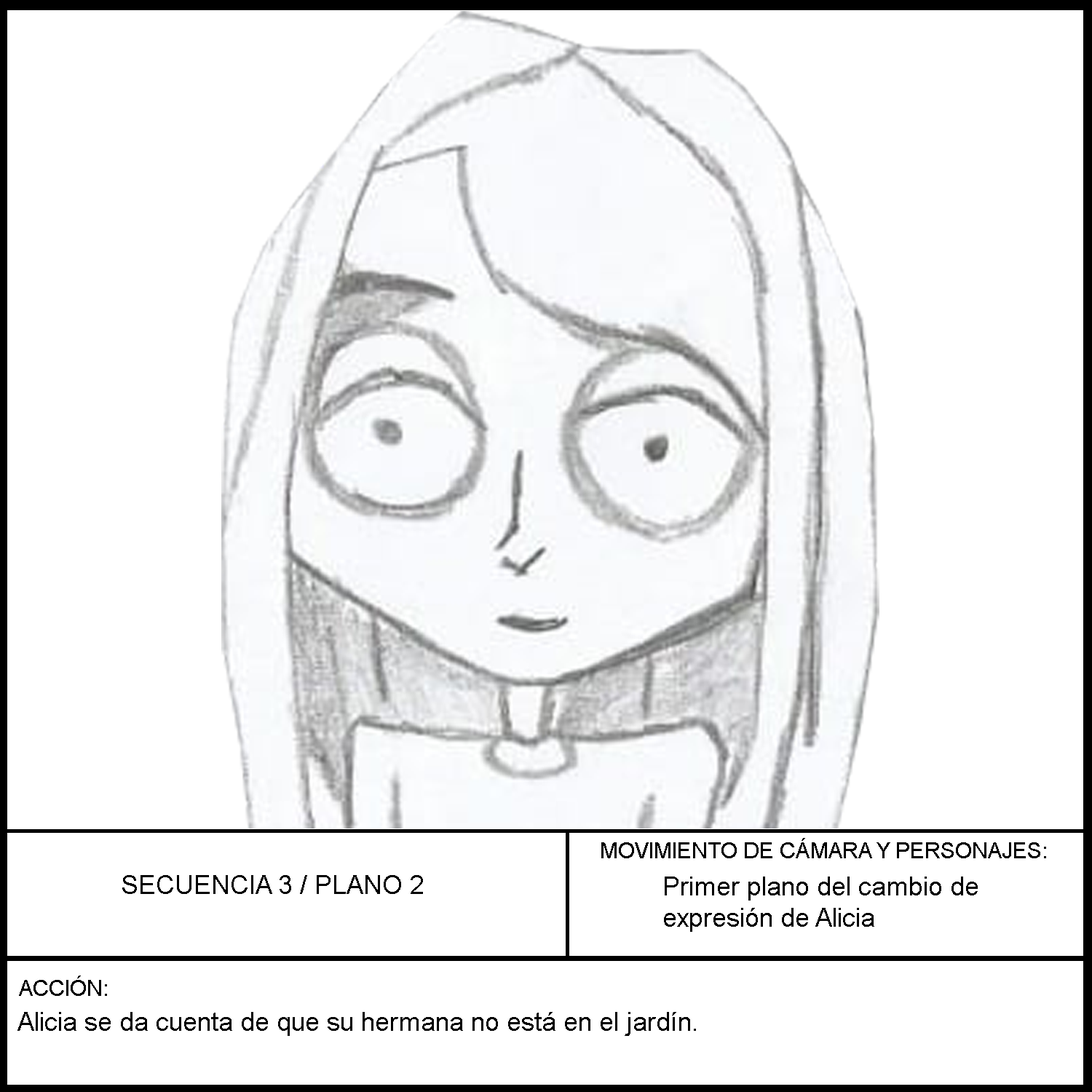
<style>
.page{position:relative;width:1092px;height:1092px;background:#ffffff}
.page>*{position:absolute;margin:0}
.t1{font:26.2px "ArialMT";color:#000000}
</style>
<div class="page">
<p class="t1" style="left:122px;top:875px;width:301px;height:19px">SECUENCIA 3 / PLANO 2</p>
<p class="t1" style="left:664px;top:877px;width:314px;height:55px">Primer plano del cambio de expresión de Alicia</p>
<p class="t1" style="left:17px;top:1012px;width:679px;height:24px">Alicia se da cuenta de que su hermana no está en el jardín.</p>
</div>
